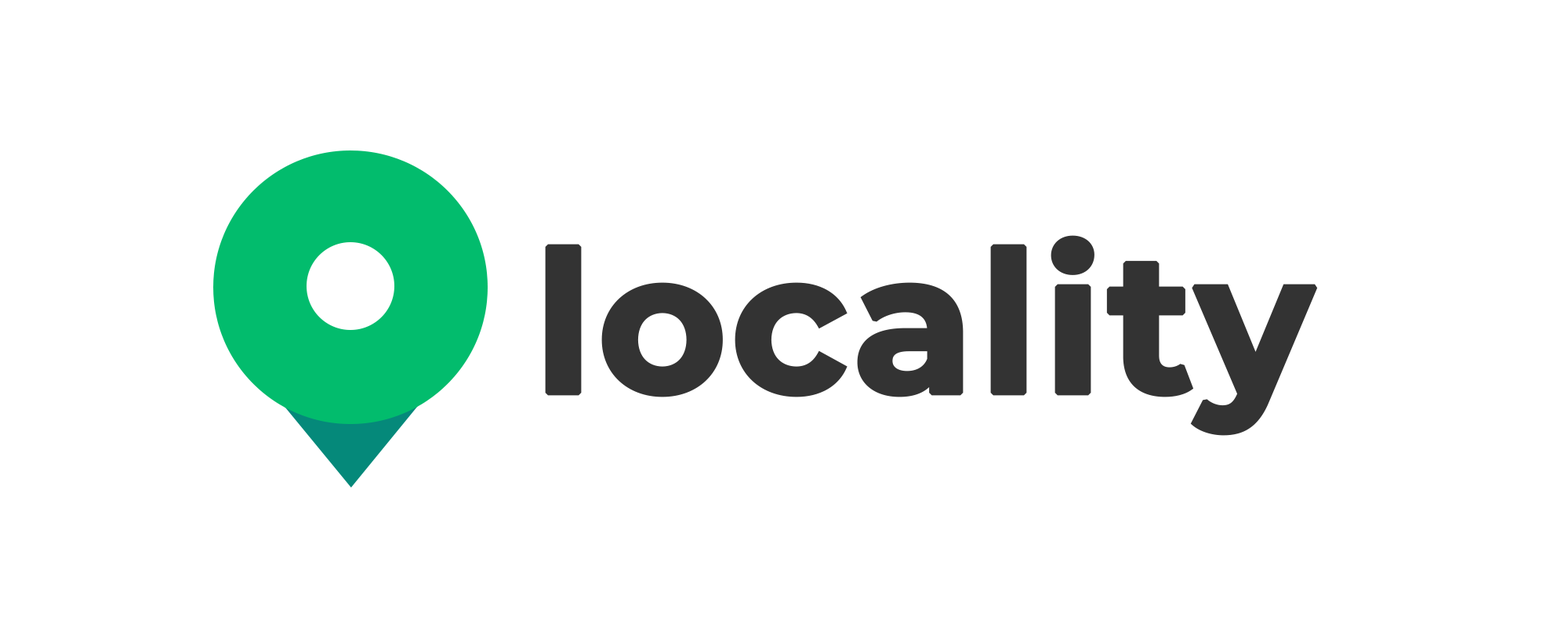
<style>
.page{position:relative;width:1568px;height:638px;background:#ffffff}
.page>*{position:absolute;margin:0}
.t1{font:196px "Montserrat-Bold";color:#333333;font-weight:bold}
</style>
<div class="page">
<p class="t1" style="left:545px;top:235px;width:773px;height:201px">locality</p>
</div>
